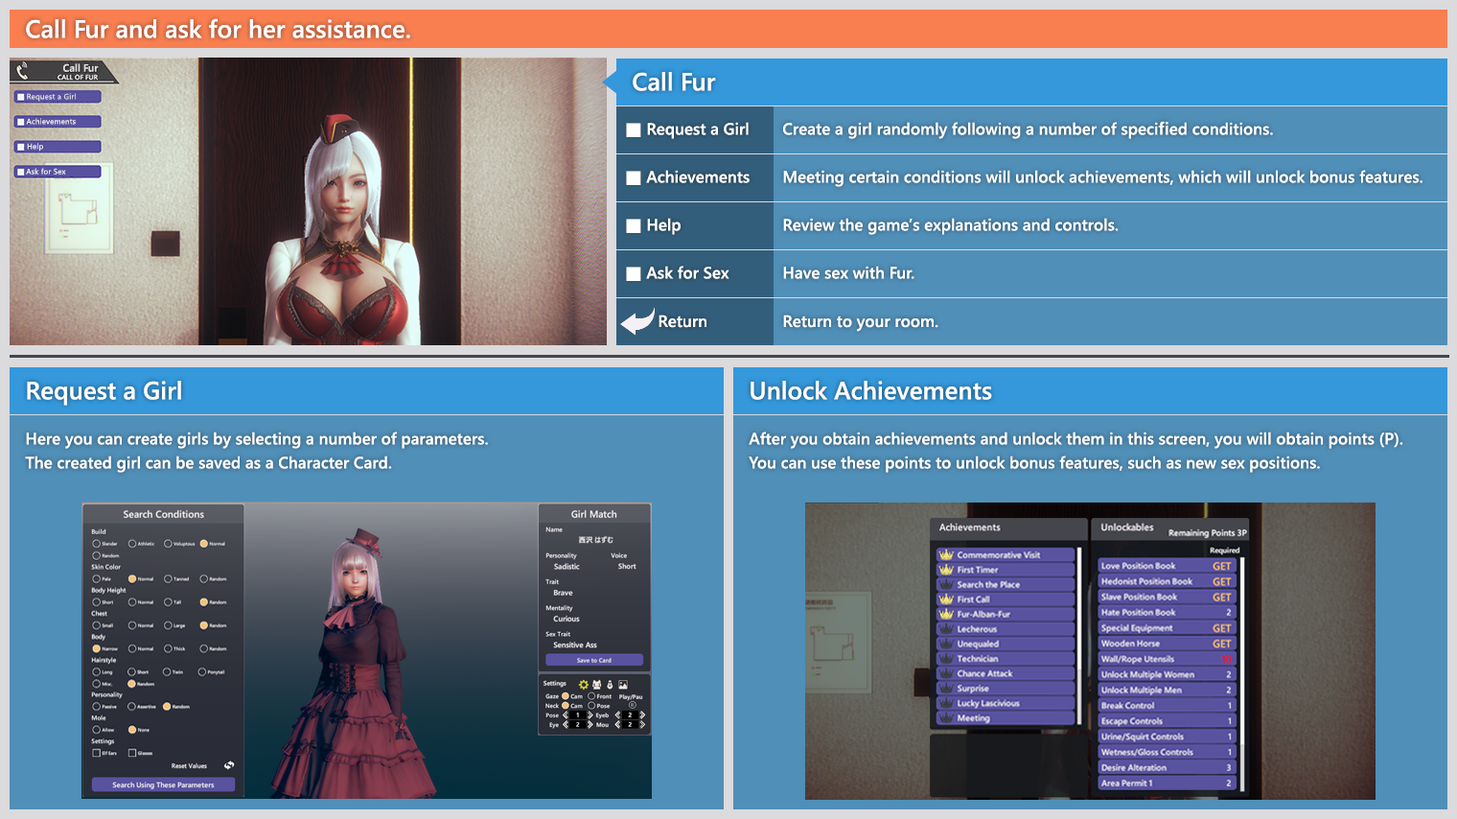
<style>
.page{position:relative;width:1457px;height:819px;background:#508fb8}
.page>*{position:absolute;margin:0}
.t1{font:24.9px "YuGothicUI-Semibold";color:#ffffff}
.t2{font:10.5px "YuGothicUI-Semibold";color:#e2e0e2}
.t3{font:7.7px "YuGothicUI-Regular";letter-spacing:0.025em;color:#e2e0e2}
.t4{font:7.7px "YuGothicUI-Regular";letter-spacing:0.025em;color:#eeeeee}
.t5{font:16.3px "YuGothicUI-Semibold";color:#ffffff}
.t6{font:16.6px "YuGothicUI-Semibold";color:#ffffff}
.t7{font:16.3px/24px "YuGothicUI-Semibold";color:#ffffff}
</style>
<div class="page">
<p class="t1" style="left:26px;top:18px;width:384px;height:20px">Call Fur and ask for her assistance.</p>
<p class="t2" style="left:63px;top:63px;width:36px;height:9px">Call Fur</p>
<p class="t1" style="left:633px;top:72px;width:83px;height:19px">Call Fur</p>
<p class="t3" style="left:27px;top:93px;width:49px;height:9px">Request a Girl</p>
<p class="t4" style="left:26px;top:118px;width:50px;height:7px">Achievements</p>
<p class="t5" style="left:647px;top:122px;width:102px;height:17px">Request a Girl</p>
<p class="t5" style="left:783px;top:121px;width:490px;height:18px">Create a girl randomly following a number of specified conditions.</p>
<p class="t4" style="left:27px;top:143px;width:16px;height:8px">Help</p>
<p class="t4" style="left:26px;top:168px;width:40px;height:6px">Ask for Sex</p>
<p class="t5" style="left:646px;top:170px;width:104px;height:13px">Achievements</p>
<p class="t5" style="left:783px;top:170px;width:639px;height:17px">Meeting certain conditions will unlock achievements, which will unlock bonus features.</p>
<p class="t5" style="left:647px;top:218px;width:33px;height:17px">Help</p>
<p class="t5" style="left:783px;top:218px;width:336px;height:17px">Review the game’s explanations and controls.</p>
<p class="t5" style="left:646px;top:265px;width:83px;height:14px">Ask for Sex</p>
<p class="t5" style="left:783px;top:265px;width:131px;height:14px">Have sex with Fur.</p>
<p class="t6" style="left:658px;top:314px;width:48px;height:14px">Return</p>
<p class="t6" style="left:783px;top:314px;width:155px;height:18px">Return to your room.</p>
<p class="t1" style="left:27px;top:381px;width:154px;height:24px">Request a Girl</p>
<p class="t1" style="left:750px;top:381px;width:242px;height:19px">Unlock Achievements</p>
<p class="t7" style="left:25px;top:431px;width:463px;height:42px">Here you can create girls by selecting a number of parameters.<br>The created girl can be saved as a Character Card.</p>
<p class="t7" style="left:749px;top:431px;width:654px;height:42px">After you obtain achievements and unlock them in this screen, you will obtain points (P).<br>You can use these points to unlock bonus features, such as new sex positions.</p>
</div>
